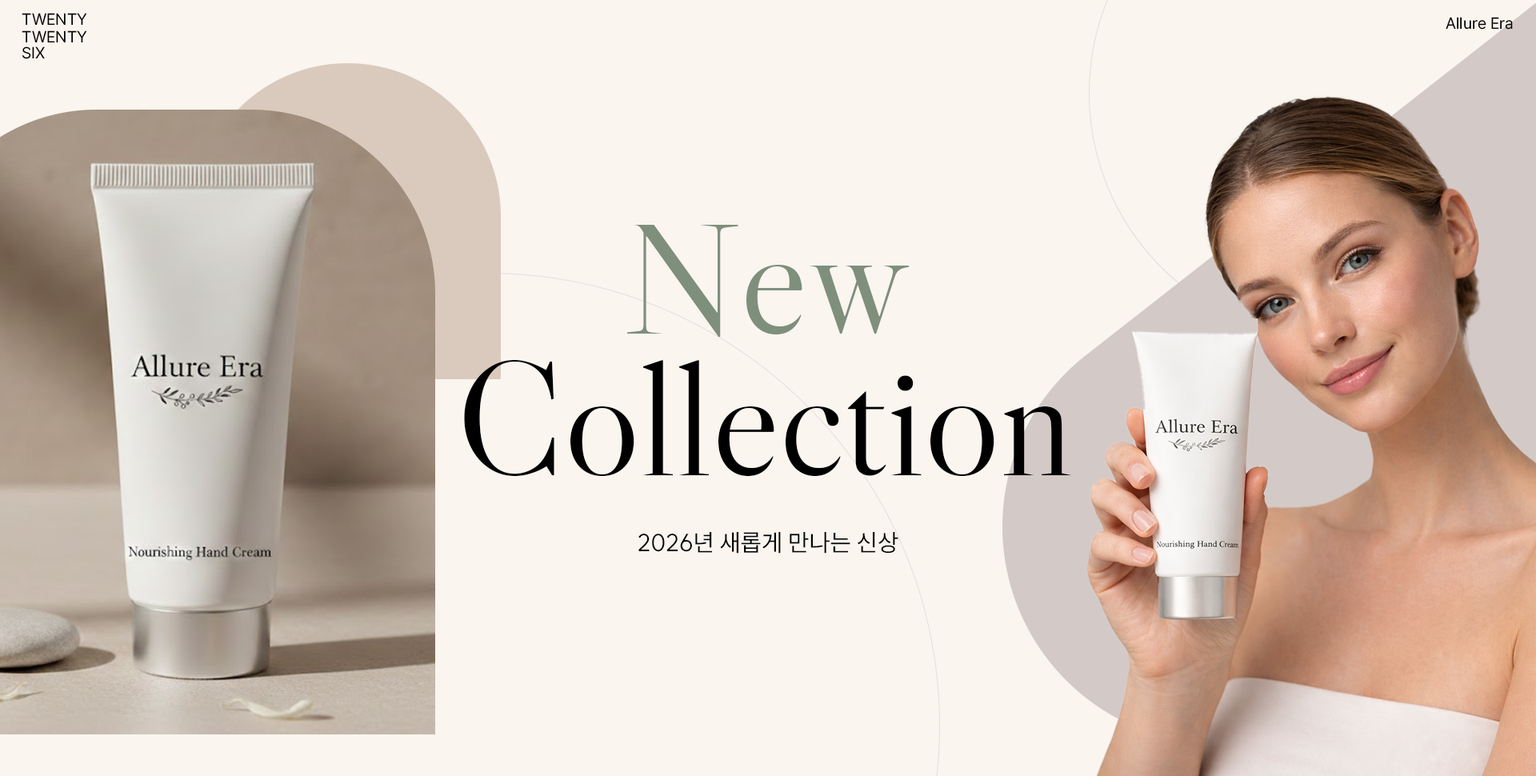
<style>
.page{position:relative;width:1536px;height:776px;background:#faf5ef}
.page>*{position:absolute;margin:0}
.t1{font:16px "Pretendard-Regular";color:#000000}
.t2{font:160px "LibreCaslonDisplay-Regular";color:#7e8f7c}
.t3{font:160px "LibreCaslonDisplay-Regular";color:#000000}
.t4{font:24px "SUIT-Regular";color:#000000;text-transform:uppercase}
</style>
<div class="page">
<p class="t1" style="left:22px;top:13px;width:65px;height:12px">TWENTY</p>
<p class="t1" style="left:1446px;top:17px;width:67px;height:13px">Allure Era</p>
<p class="t1" style="left:22px;top:30px;width:65px;height:12px">TWENTY</p>
<p class="t1" style="left:22px;top:46px;width:23px;height:13px">SIX</p>
<p class="t2" style="left:627px;top:225px;width:283px;height:112px">New</p>
<p class="t3" style="left:464px;top:360px;width:608px;height:116px">Collection</p>
<p class="t4" style="left:639px;top:532px;width:260px;height:22px">2026년 새롭게 만나는 신상</p>
</div>
